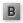
<style>
.page{position:relative;width:23px;height:23px}
.page>*{position:absolute;margin:0}
.t1{font:13px "DIN-Bold";color:#343434}
</style>
<div class="page">
<p class="t1" style="left:8px;top:6px;width:7px;height:10px">B</p>
</div>
